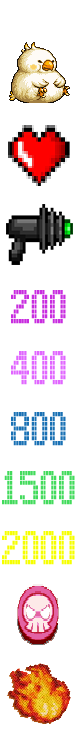
<style>
.page{position:relative;width:79px;height:756px;background:#ffffff}
.page>*{position:absolute;margin:0}
.t1{font:73.1px "Arcade";color:#c82ddf;scale:0.55 1}
.t2{font:73.1px "Arcade";color:#e066ff;scale:0.55 1}
.t3{font:73.1px "Arcade";color:#1a71b4;scale:0.55 1}
.t4{font:73.1px "Arcade";color:#43db5c;scale:0.55 1}
.t5{font:73.1px "Arcade";color:#f6ff00;scale:0.55 1}
</style>
<div class="page">
<p class="t1" style="left:11px;top:290px;width:55px;height:34px">200</p>
<p class="t2" style="left:11px;top:351px;width:55px;height:34px">400</p>
<p class="t3" style="left:11px;top:412px;width:55px;height:34px">800</p>
<p class="t4" style="left:2px;top:471px;width:73px;height:34px">1500</p>
<p class="t5" style="left:2px;top:531px;width:73px;height:34px">2000</p>
</div>
